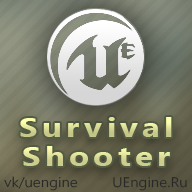
<style>
.page{position:relative;width:192px;height:192px}
.page>*{position:absolute;margin:0}
.t1{font:27.3px/29.2px "SegoeUI-Bold";letter-spacing:0.12em;color:#d7d894;scale:1.22 1}
.t2{font:13.7px "SegoeUI-Semilight";color:#282828;scale:1.12 1}
</style>
<div class="page">
<p class="t1" style="left:20px;top:117px;width:152px;height:49px;text-align:center">Survival<br>Shooter</p>
<p class="t2" style="left:4px;top:176px;width:74px;height:15px">vk/uengine</p>
<p class="t2" style="left:113px;top:177px;width:74px;height:14px">UEngine.Ru</p>
</div>
